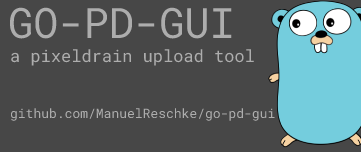
<style>
.page{position:relative;width:361px;height:152px;background:#474747}
.page>*{position:absolute;margin:0}
.t1{font:42px "RobotoMono-Regular";color:#adadad}
.t2{font:17px "RobotoMono-Regular";color:#adadad}
.t3{font:13px "RobotoMono-Regular";color:#adadad}
</style>
<div class="page">
<p class="t1" style="left:10px;top:7px;width:222px;height:32px">GO-PD-GUI</p>
<p class="t2" style="left:11px;top:49px;width:243px;height:17px">a pixeldrain upload tool</p>
<p class="t3" style="left:10px;top:108px;width:265px;height:13px">github.com/ManuelReschke/go-pd-gui</p>
</div>
